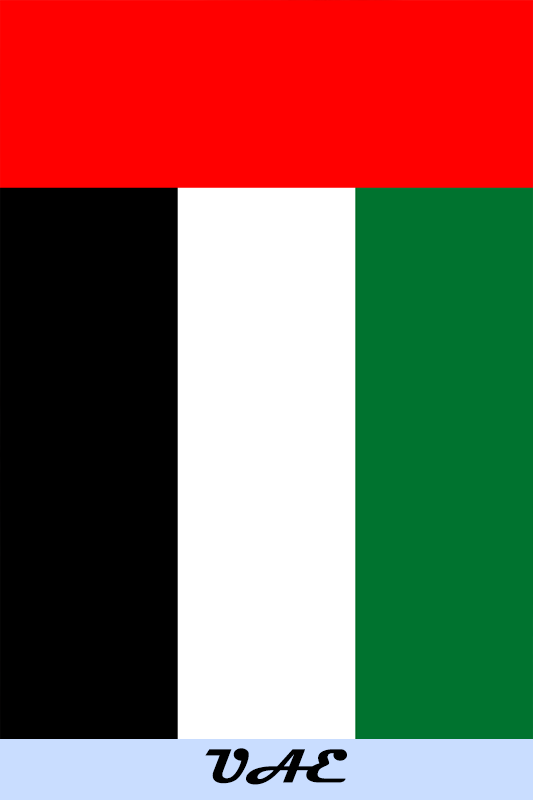
<style>
.page{position:relative;width:533px;height:800px;background:#ffffff}
.page>*{position:absolute;margin:0}
.t1{font:48px "Magneto-Bold";color:#000000;scale:1.08 1}
</style>
<div class="page">
<p class="t1" style="left:205px;top:748px;width:142px;height:37px">UAE</p>
</div>
